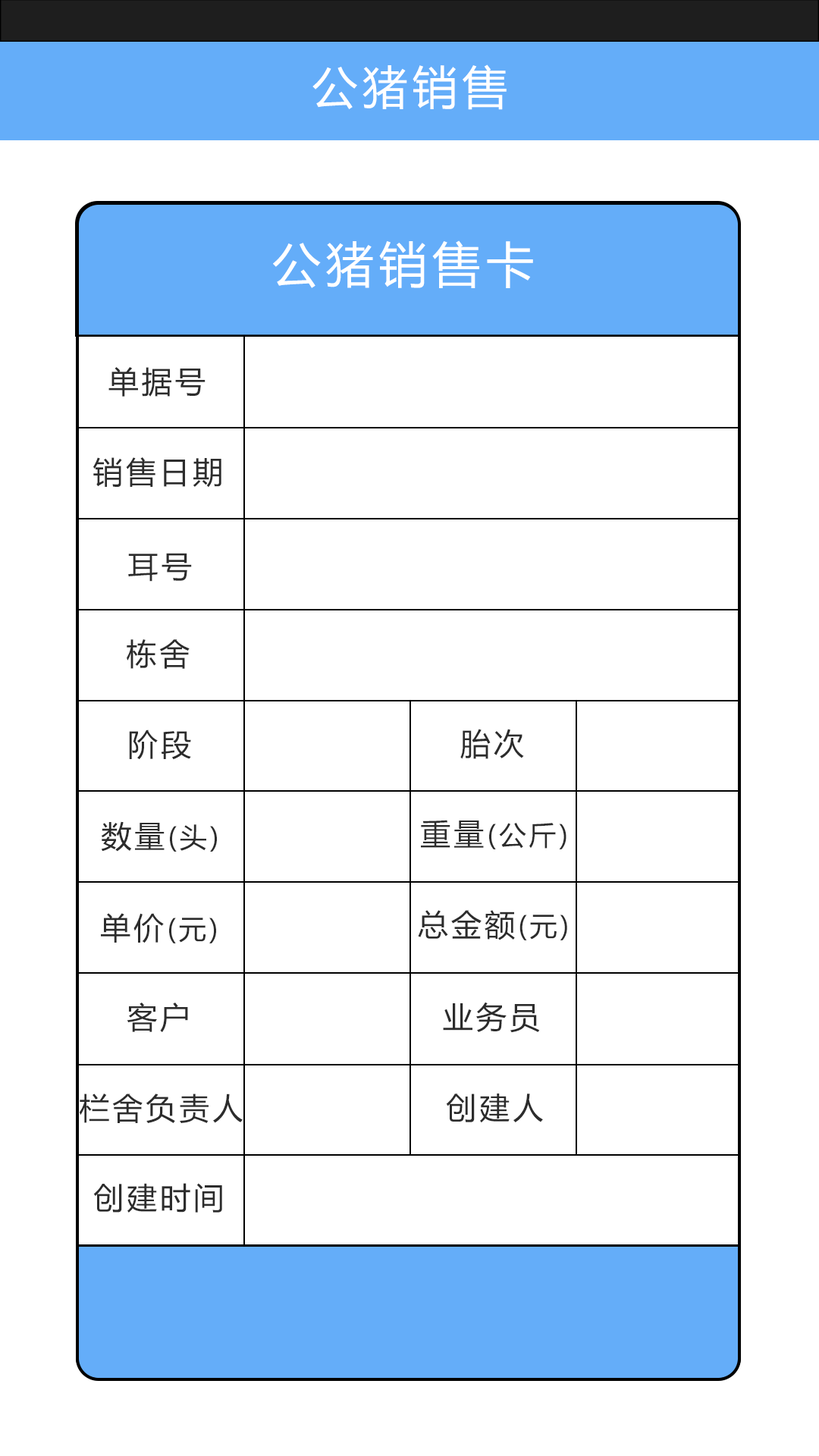
<style>
.page{position:relative;width:819px;height:1456px;background:#ffffff}
.page>*{position:absolute;margin:0}
.t1{font:45.5px "MicrosoftYaHei";letter-spacing:0.1em;color:#ffffff}
.t2{font:48.5px "MicrosoftYaHei";letter-spacing:0.1em;color:#ffffff}
.t3{font:30.3px "MicrosoftYaHei";letter-spacing:0.1em;color:#2c2c2c}
.t4{font:27.3px "MicrosoftYaHei";letter-spacing:0.1em;color:#2c2c2c}
</style>
<div class="page">
<p class="t1" style="left:312px;top:64px;width:195px;height:46px">公猪销售</p>
<p class="t2" style="left:273px;top:240px;width:260px;height:48px">公猪销售卡</p>
<p class="t3" style="left:108px;top:367px;width:98px;height:30px">单据号</p>
<p class="t3" style="left:93px;top:457px;width:128px;height:31px">销售日期</p>
<p class="t3" style="left:128px;top:553px;width:64px;height:29px">耳号</p>
<p class="t3" style="left:127px;top:639px;width:63px;height:30px">栋舍</p>
<p class="t3" style="left:129px;top:730px;width:62px;height:30px">阶段</p>
<p class="t3" style="left:460px;top:729px;width:64px;height:30px">胎次</p>
<p class="t4" style="left:101px;top:821px;width:116px;height:31px"><span class="t3">数量</span>(头)</p>
<p class="t4" style="left:421px;top:820px;width:145px;height:29px"><span class="t3">重量</span>(公斤)</p>
<p class="t4" style="left:101px;top:913px;width:115px;height:30px"><span class="t3">单价</span>(元)</p>
<p class="t3" style="left:418px;top:910px;width:149px;height:30px">总金额<span class="t4">(元)</span></p>
<p class="t3" style="left:443px;top:1002px;width:97px;height:31px">业务员</p>
<p class="t3" style="left:127px;top:1003px;width:61px;height:29px">客户</p>
<p class="t3" style="left:79px;top:1094px;width:164px;height:29px">栏舍负责人</p>
<p class="t3" style="left:446px;top:1094px;width:97px;height:29px">创建人</p>
<p class="t3" style="left:93px;top:1183px;width:129px;height:30px">创建时间</p>
</div>
